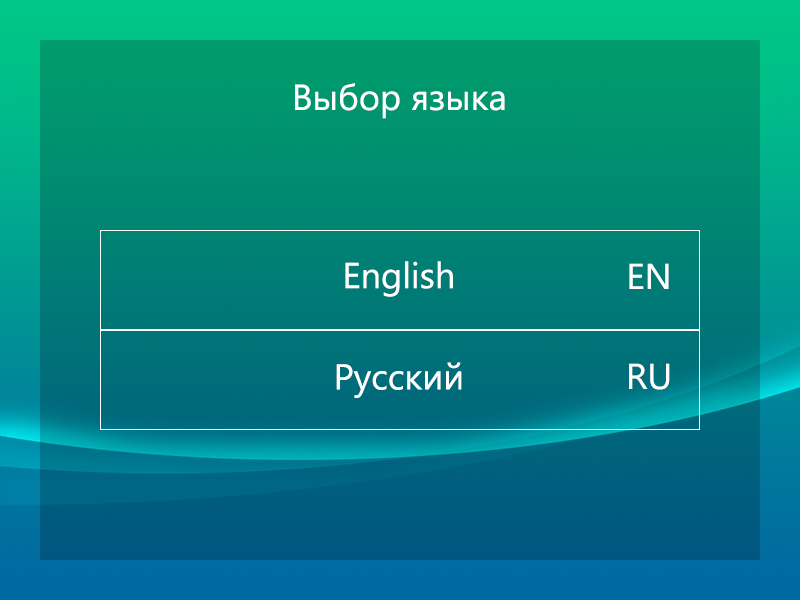
<style>
.page{position:relative;width:800px;height:600px}
.page>*{position:absolute;margin:0}
.t1{font:36px "SegoeUI";color:#ffffff}
</style>
<div class="page">
<p class="t1" style="left:295px;top:83px;width:210px;height:36px">Выбор языка</p>
<p class="t1" style="left:345px;top:261px;width:108px;height:36px">English</p>
<p class="t1" style="left:629px;top:263px;width:40px;height:26px">EN</p>
<p class="t1" style="left:336px;top:362px;width:126px;height:36px">Русский</p>
<p class="t1" style="left:629px;top:363px;width:41px;height:27px">RU</p>
</div>
